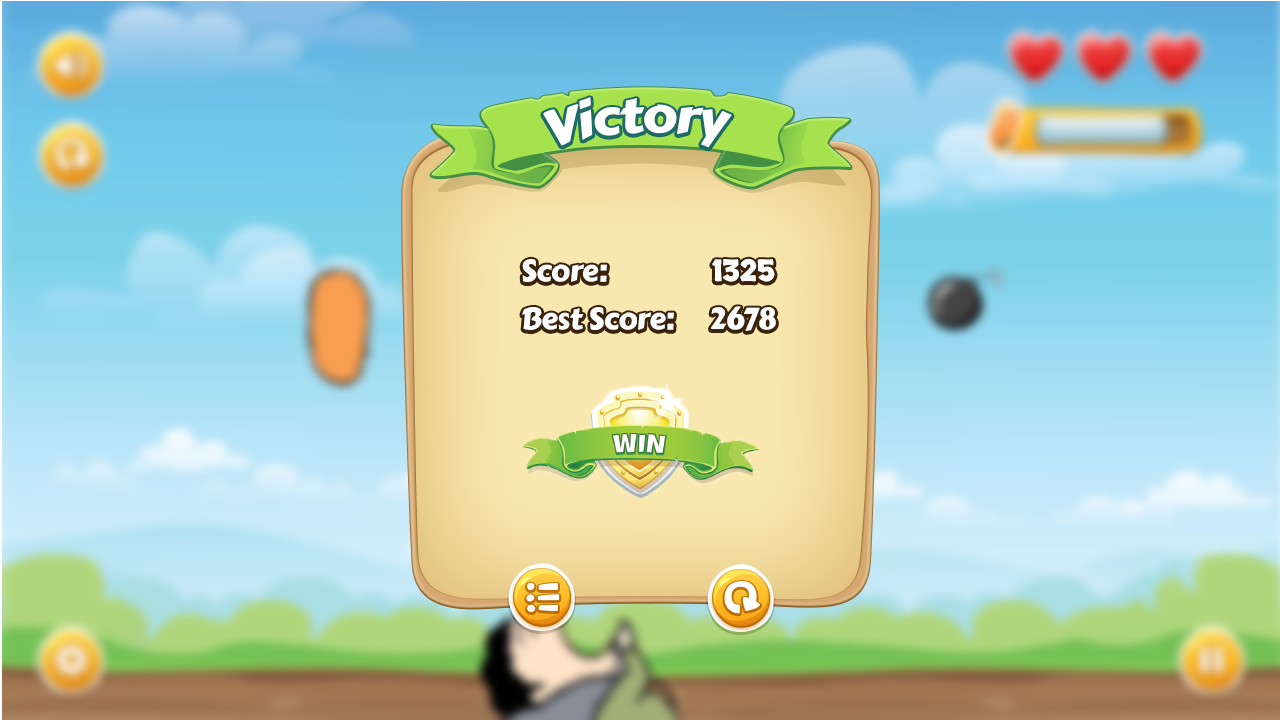
<style>
.page{position:relative;width:1280px;height:720px}
.page>*{position:absolute;margin:0}
.t1{font:49px "CarterOne";letter-spacing:-0.02em;color:#ffffff}
.t2{font:30px/48px "CarterOne";letter-spacing:-0.02em;color:#ffffff}
.t3{font:30px/48px "Skranji-Bold";letter-spacing:-0.02em;color:#ffffff}
</style>
<div class="page">
<p class="t1" style="left:543px;top:97px;width:189px;height:51px;rotate:-2deg">Victory</p>
<p class="t2" style="left:522px;top:258px;width:254px;height:73px">Score:                  <span class="t3">1325<br></span>Best Score:      2678</p>
</div>
